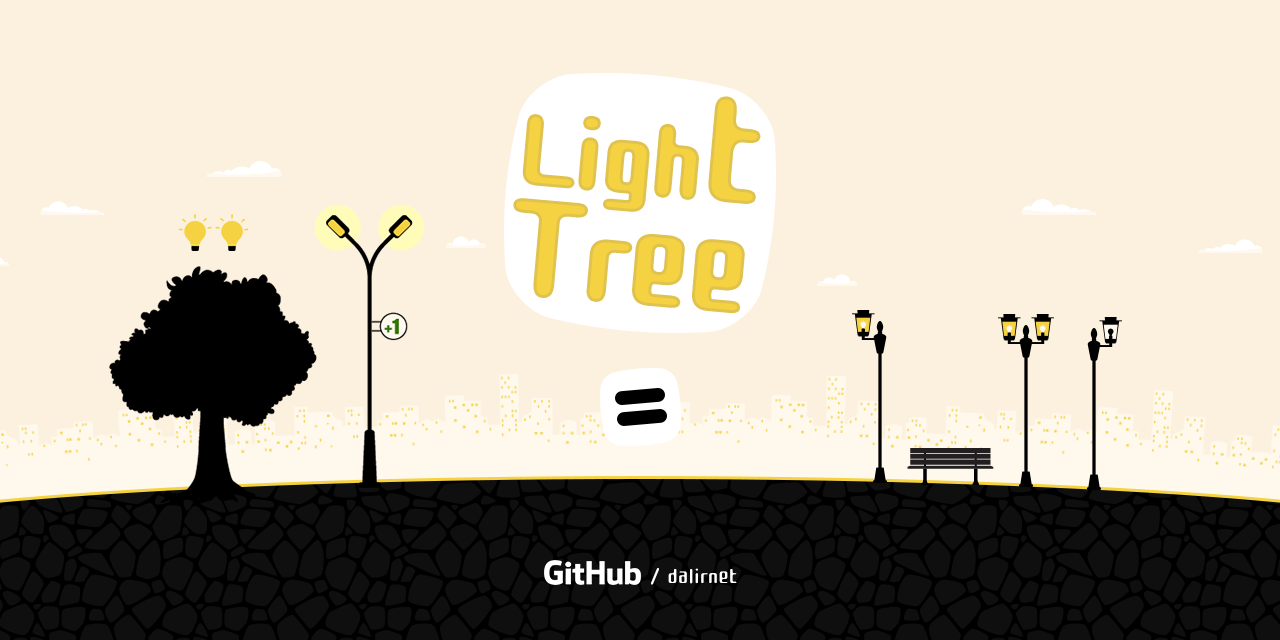
<style>
.page{position:relative;width:1280px;height:640px;background:#fcf1de}
.page>*{position:absolute;margin:0}
.t1{font:150px/110px "CuteFont-Regular";color:#f4d242}
.t2{font:220px/110px "CuteFont-Regular";color:#f4d242}
.t3{font:210px/110px "CuteFont-Regular";color:#f4d242}
.t4{font:180px/110px "CuteFont-Regular";color:#f4d242}
.t5{font:31.6px "CuteFont-Regular";color:#ffffff}
</style>
<div class="page">
<p class="t1" style="left:516px;top:99px;width:242px;height:211px;rotate:5deg">Ligh<span class="t2">t<br></span><span class="t3">T</span><span class="t4">ree</span></p>
<p class="t5" style="left:651px;top:568px;width:86px;height:17px">dalirnet /</p>
</div>
